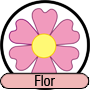
<style>
.page{position:relative;width:90px;height:90px;background:#ffffff}
.page>*{position:absolute;margin:0}
.t1{font:14.7px "Swiss721BT-RomanCondensed";color:#000000}
</style>
<div class="page">
<p class="t1" style="left:35px;top:75px;width:20px;height:11px">Flor</p>
</div>
